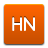
<style>
.page{position:relative;width:48px;height:48px;background:#ffffff}
.page>*{position:absolute;margin:0}
.t1{font:17.3px "Comfortaa-Bold";letter-spacing:0.05em;color:#ffffff}
</style>
<div class="page">
<p class="t1" style="left:12px;top:17px;width:23px;height:14px">HN</p>
</div>
